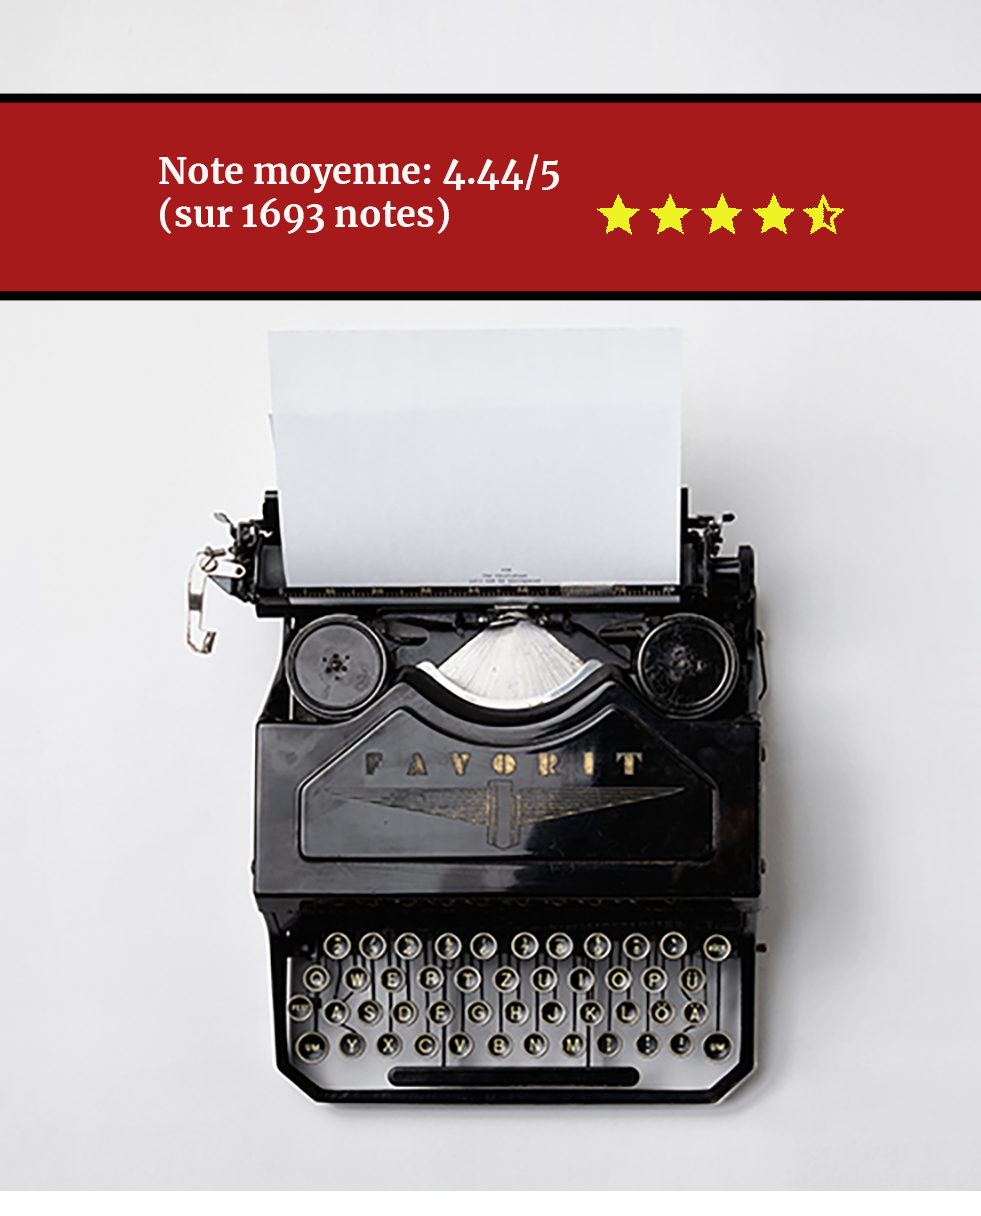
<style>
.page{position:relative;width:981px;height:1216px}
.page>*{position:absolute;margin:0}
.t1{font:36px "Merriweather-Bold";color:#fcf7f7}
</style>
<div class="page">
<p class="t1" style="left:159px;top:154px;width:400px;height:80px">Note moyenne: 4.44/5<br>(sur 1693 notes)</p>
</div>
